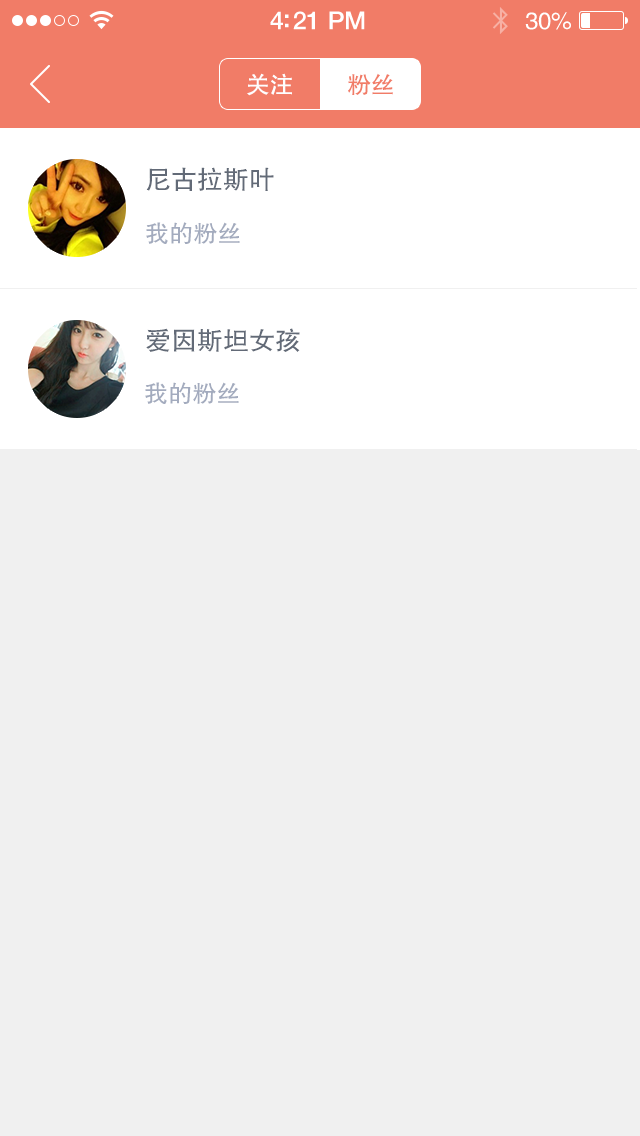
<style>
.page{position:relative;width:640px;height:1136px;background:#f0f0f0}
.page>*{position:absolute;margin:0}
.t1{font:25px "HelveticaNeue-Medium";letter-spacing:-0.02em;color:#ffffff}
.t2{font:24px "FZHTJW--GB1-0";letter-spacing:-0.02em;color:#ffffff}
.t3{font:24px "FZHTJW--GB1-0";letter-spacing:-0.02em;color:#fefefe}
.t4{font:24px "FZHTJW--GB1-0";letter-spacing:-0.02em;color:#f17c67}
.t5{font:26px "FZHTJW--GB1-0";color:#626a77}
.t6{font:24px "FZHTJW--GB1-0";color:#a3abbe}
</style>
<div class="page">
<p class="t1" style="left:270px;top:11px;width:95px;height:19px">4:21 PM</p>
<p class="t2" style="left:525px;top:12px;width:46px;height:18px">30%</p>
<p class="t3" style="left:247px;top:73px;width:45px;height:23px">关注</p>
<p class="t4" style="left:348px;top:73px;width:45px;height:22px">粉丝</p>
<p class="t5" style="left:146px;top:167px;width:128px;height:24px">尼古拉斯叶</p>
<p class="t6" style="left:146px;top:222px;width:94px;height:22px">我的粉丝</p>
<p class="t5" style="left:146px;top:328px;width:154px;height:24px">爱因斯坦女孩</p>
<p class="t6" style="left:145px;top:382px;width:94px;height:22px">我的粉丝</p>
</div>
